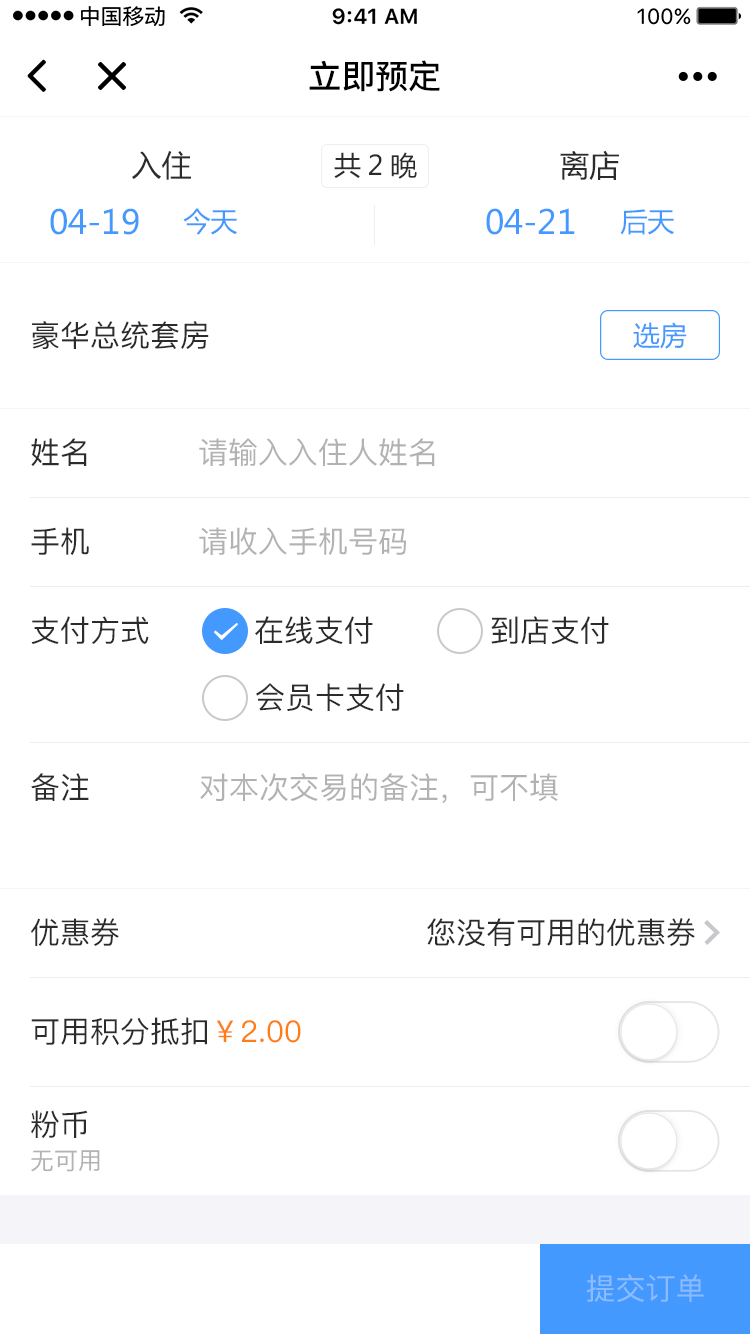
<style>
.page{position:relative;width:750px;height:1334px;background:#ffffff}
.page>*{position:absolute;margin:0}
.t1{font:33.2px "PingFang-SC-Bold";color:#000000}
.t2{font:30px "MicrosoftYaHei";color:#2b2b2b}
.t3{font:27px "MicrosoftYaHei";color:#2b2b2b}
.t4{font:33px "MicrosoftYaHei";color:#4499ff}
.t5{font:27px "MicrosoftYaHei";color:#4499ff}
.t6{font:30px "PingFang-SC-Medium";color:#2b2b2b}
.t7{font:30px "PingFang-SC-Medium";color:#b2b2b2}
.t8{font:30px "PingFang-SC-Medium";color:#ff7d13}
.t9{font:24px "PingFang-SC-Medium";color:#b2b2b2}
.t10{font:30px "PingFang-SC-Medium";color:#8dbbff}
</style>
<div class="page">
<p class="t1" style="left:309px;top:60px;width:131px;height:32px">立即预定</p>
<p class="t2" style="left:560px;top:150px;width:59px;height:30px">离店</p>
<p class="t2" style="left:132px;top:151px;width:59px;height:29px">入住</p>
<p class="t3" style="left:334px;top:152px;width:83px;height:27px">共2晚</p>
<p class="t4" style="left:50px;top:208px;width:89px;height:27px">04-19</p>
<p class="t5" style="left:183px;top:208px;width:54px;height:27px">今天</p>
<p class="t4" style="left:486px;top:208px;width:89px;height:27px">04-21</p>
<p class="t5" style="left:620px;top:209px;width:54px;height:26px">后天</p>
<p class="t6" style="left:32px;top:321px;width:177px;height:28px">豪华总统套房</p>
<p class="t5" style="left:633px;top:322px;width:54px;height:27px">选房</p>
<p class="t6" style="left:31px;top:438px;width:56px;height:28px">姓名</p>
<p class="t7" style="left:199px;top:438px;width:236px;height:28px">请输入入住人姓名</p>
<p class="t6" style="left:31px;top:527px;width:58px;height:28px">手机</p>
<p class="t7" style="left:199px;top:527px;width:207px;height:28px">请收入手机号码</p>
<p class="t6" style="left:31px;top:616px;width:118px;height:28px">支付方式</p>
<p class="t6" style="left:255px;top:616px;width:118px;height:28px">在线支付</p>
<p class="t6" style="left:491px;top:616px;width:118px;height:28px">到店支付</p>
<p class="t6" style="left:256px;top:683px;width:148px;height:29px">会员卡支付</p>
<p class="t6" style="left:31px;top:773px;width:58px;height:28px">备注</p>
<p class="t7" style="left:200px;top:773px;width:358px;height:30px">对本次交易的备注，可不填</p>
<p class="t6" style="left:31px;top:918px;width:88px;height:28px">优惠券</p>
<p class="t6" style="left:427px;top:918px;width:268px;height:29px">您没有可用的优惠券</p>
<p class="t6" style="left:31px;top:1017px;width:270px;height:28px">可用积分抵扣<span class="t8">￥2.00</span></p>
<p class="t6" style="left:31px;top:1110px;width:57px;height:29px">粉币</p>
<p class="t9" style="left:31px;top:1150px;width:69px;height:22px">无可用</p>
<p class="t10" style="left:586px;top:1274px;width:118px;height:28px">提交订单</p>
</div>
